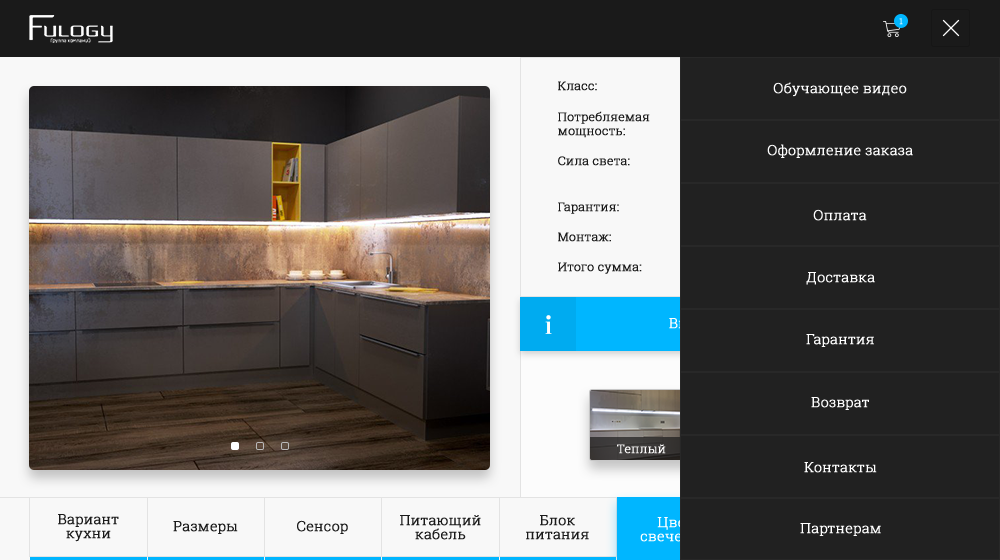
<style>
.page{position:relative;width:1000px;height:560px;background:#212121}
.page>*{position:absolute;margin:0}
.t1{font:8px "RobotoSlab-Light";font-weight:bold}
.t2{font:12px "RobotoSlab-Light";color:#1a1a1a;font-weight:bold}
.t3{font:14px "RobotoSlab-Light";color:#ffffff;font-weight:bold}
.t4{font:12px/14px "RobotoSlab-Light";color:#1a1a1a;font-weight:bold}
.t5{font:12px "RobotoSlab-Light";color:#fffefe;font-weight:bold}
.t6{font:14px/14px "RobotoSlab-Light";color:#1a1a1a;font-weight:bold}
.t7{font:14px "RobotoSlab-Light";color:#1a1a1a;font-weight:bold}
.t8{font:14px/14px "RobotoSlab-Light";font-weight:bold}
</style>
<div class="page">
<p class="t1" style="left:899px;top:18px;width:4px;height:7px">1</p>
<p class="t2" style="left:558px;top:81px;width:39px;height:10px">Класс:</p>
<p class="t3" style="left:773px;top:82px;width:134px;height:15px">Обучающее видео</p>
<p class="t4" style="left:558px;top:111px;width:92px;height:27px">Потребляемая<br>мощность:</p>
<p class="t3" style="left:767px;top:144px;width:146px;height:14px">Оформление заказа</p>
<p class="t2" style="left:558px;top:156px;width:72px;height:10px">Сила света:</p>
<p class="t2" style="left:558px;top:202px;width:61px;height:12px">Гарантия:</p>
<p class="t3" style="left:813px;top:209px;width:54px;height:12px">Оплата</p>
<p class="t2" style="left:558px;top:232px;width:53px;height:10px">Монтаж:</p>
<p class="t2" style="left:558px;top:262px;width:84px;height:12px">Итого сумма:</p>
<p class="t3" style="left:806px;top:272px;width:69px;height:13px">Доставка</p>
<p class="t3" style="left:806px;top:334px;width:68px;height:13px">Гарантия</p>
<p class="t3" style="left:811px;top:397px;width:58px;height:13px">Возврат</p>
<p class="t5" style="left:617px;top:444px;width:49px;height:10px">Теплый</p>
<p class="t3" style="left:804px;top:462px;width:73px;height:11px">Контакты</p>
<p class="t6" style="left:58px;top:514px;width:61px;height:28px;text-align:center">Вариант<br>кухни</p>
<p class="t7" style="left:173px;top:521px;width:65px;height:13px">Размеры</p>
<p class="t7" style="left:297px;top:520px;width:51px;height:14px">Сенсор</p>
<p class="t6" style="left:400px;top:515px;width:81px;height:25px;text-align:center">Питающий<br>кабель</p>
<p class="t6" style="left:526px;top:515px;width:63px;height:25px;text-align:center">Блок<br>питания</p>
<p class="t8" style="left:640px;top:517px;width:70px;height:25px;text-align:center">Цвет<br>свечения</p>
<p class="t3" style="left:800px;top:523px;width:81px;height:13px">Партнерам</p>
</div>
